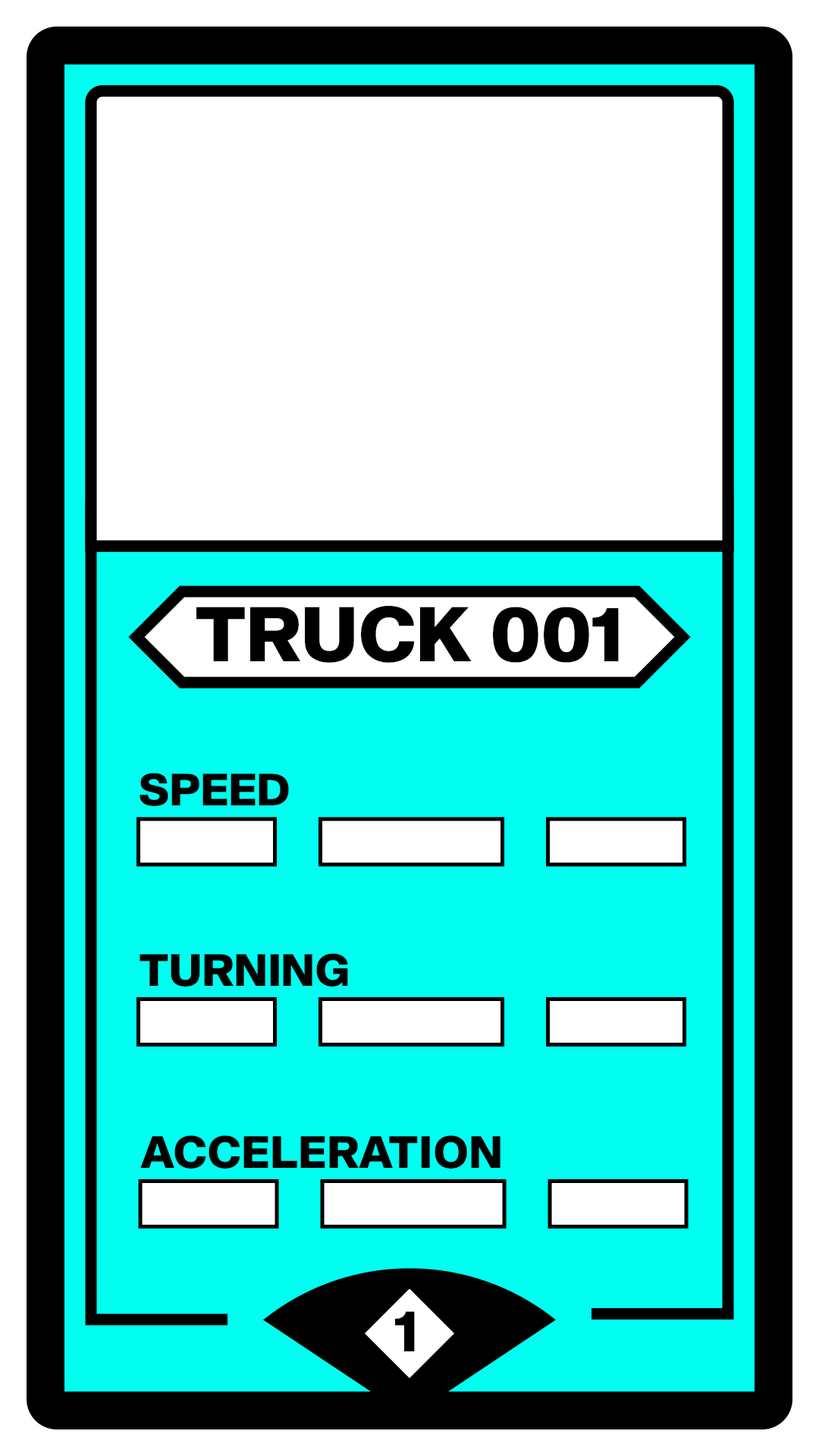
<style>
.page{position:relative;width:819px;height:1456px;background:#ffffff}
.page>*{position:absolute;margin:0}
.t1{font:75.8px "Shapiro-85SuperHeavy";letter-spacing:-0.01em;color:#000000}
.t2{font:44.2px "Shapiro-85SuperHeavy";letter-spacing:-0.01em;color:#000000}
.t3{font:44.2px "Shapiro-85SuperHeavy";letter-spacing:-0.01em;color:#000000;text-transform:uppercase}
.t4{font:56.9px "Shapiro-85SuperHeavy";letter-spacing:-0.01em;color:#000000}
</style>
<div class="page">
<p class="t1" style="left:196px;top:606px;width:423px;height:57px">TRUCK 001</p>
<p class="t2" style="left:140px;top:773px;width:149px;height:33px">SPEED</p>
<p class="t2" style="left:140px;top:953px;width:208px;height:34px">TURNING</p>
<p class="t3" style="left:140px;top:1135px;width:360px;height:34px">acceleration</p>
<p class="t4" style="left:395px;top:1311px;width:20px;height:40px">1</p>
</div>
